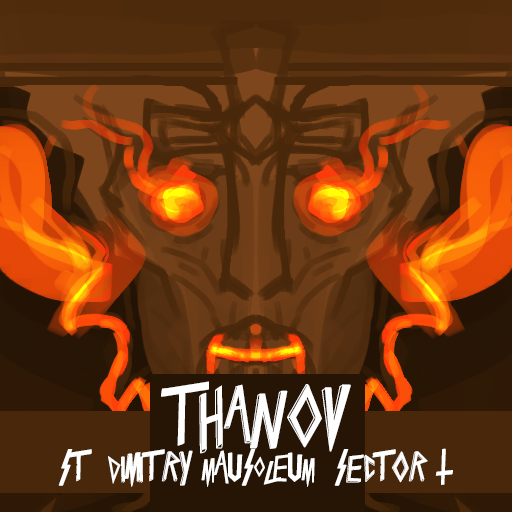
<style>
.page{position:relative;width:512px;height:512px}
.page>*{position:absolute;margin:0}
.t1{font:75px "Slaytanic";color:#ffffff}
.t2{font:36px "Slaytanic";color:#ffffff}
</style>
<div class="page">
<p class="t1" style="left:161px;top:381px;width:190px;height:73px">Thanov</p>
<p class="t2" style="left:58px;top:448px;width:395px;height:39px">St. Dimitry MAUSOLEUM. Sector 15.</p>
</div>
